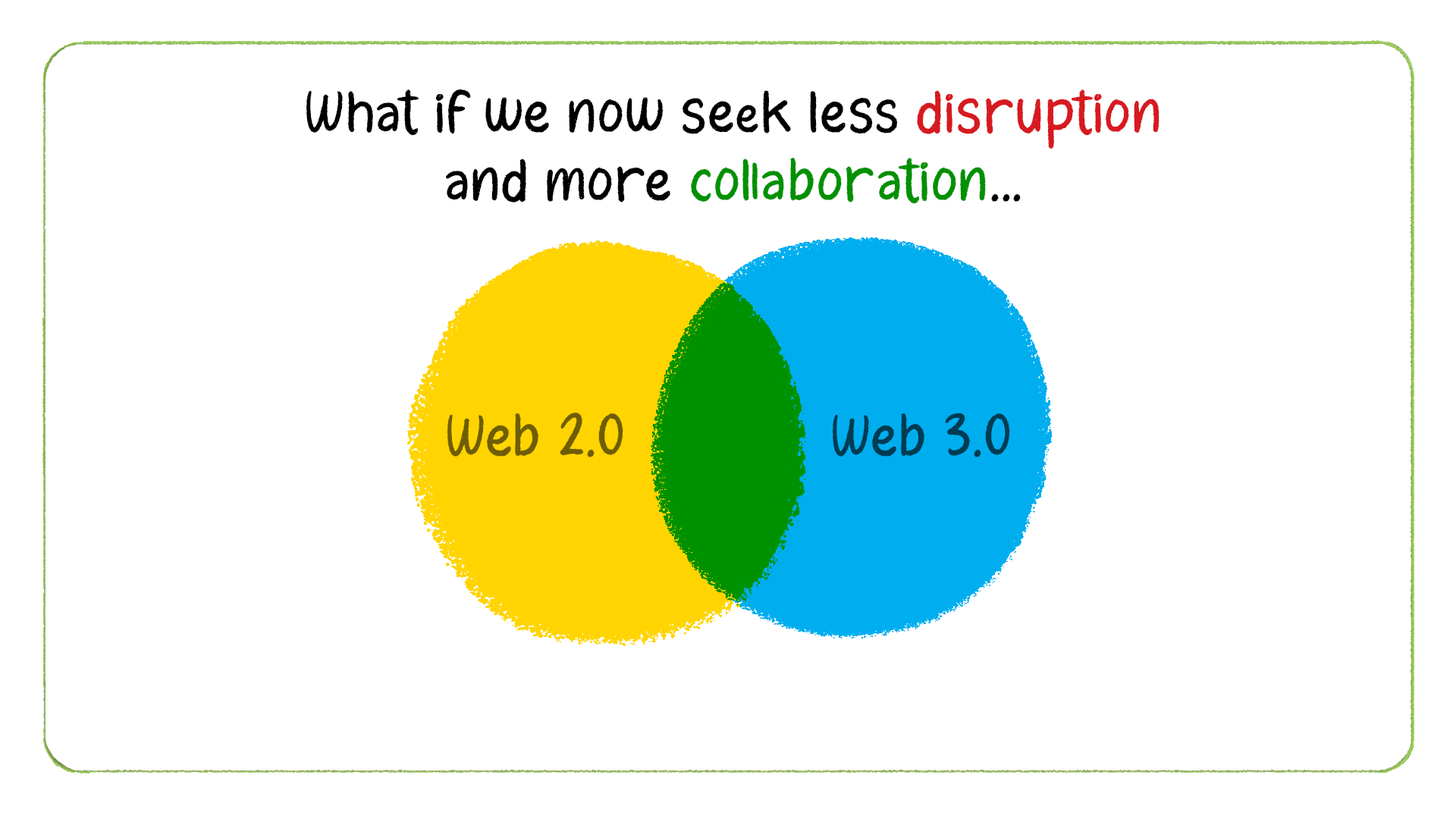
<style>
.page{position:relative;width:1456px;height:819px;background:#ffffff}
.page>*{position:absolute;margin:0}
.t1{font:45.5px/68.2px "ChristmasChalk";color:#000000}
.t2{font:45.5px/68.2px "ChristmasChalk";color:#d71920}
.t3{font:45.5px/68.2px "ChristmasChalk";color:#009100}
.t4{font:45.5px "ChristmasChalk";color:#6f5d06}
.t5{font:45.5px "ChristmasChalk";color:#003c53}
</style>
<div class="page">
<p class="t1" style="left:306px;top:89px;width:853px;height:115px;text-align:center">What if we now seek less <span class="t2">disruption</span> <br>and more <span class="t3">collaboration</span>...</p>
<p class="t4" style="left:447px;top:413px;width:176px;height:45px">Web 2.0</p>
<p class="t5" style="left:833px;top:413px;width:177px;height:45px">Web 3.0</p>
</div>
